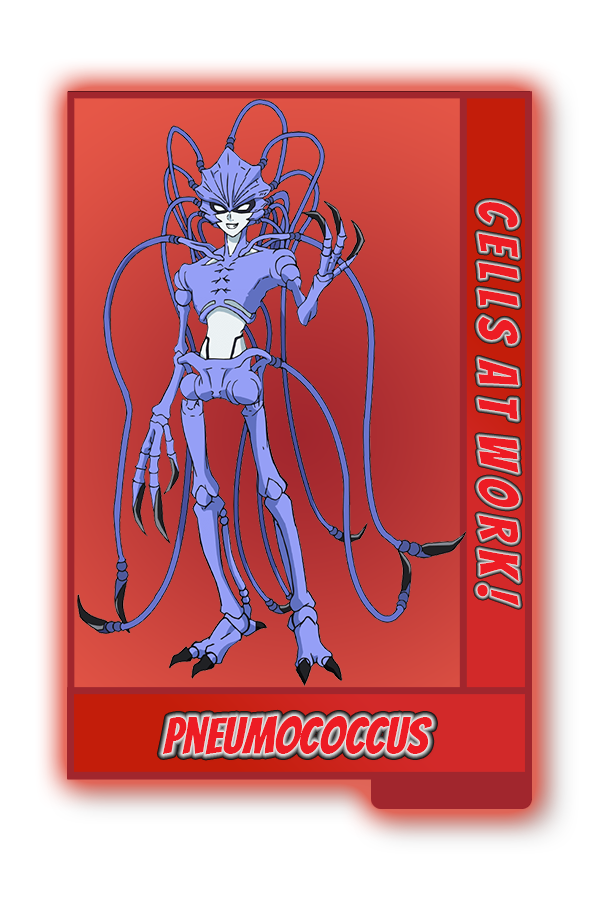
<style>
.page{position:relative;width:600px;height:900px;background:#ffffff}
.page>*{position:absolute;margin:0}
.t1{font:54px "Bangers-Regular";color:#ed1c24}
.t2{font:50px "Bangers-Regular";color:#ed1c24}
</style>
<div class="page">
<p class="t1" style="left:477px;top:202px;width:42px;height:404px;rotate:90deg">C e l l S  A t  W o r k !</p>
<p class="t2" style="left:162px;top:715px;width:270px;height:40px">Pneumococcus</p>
</div>
